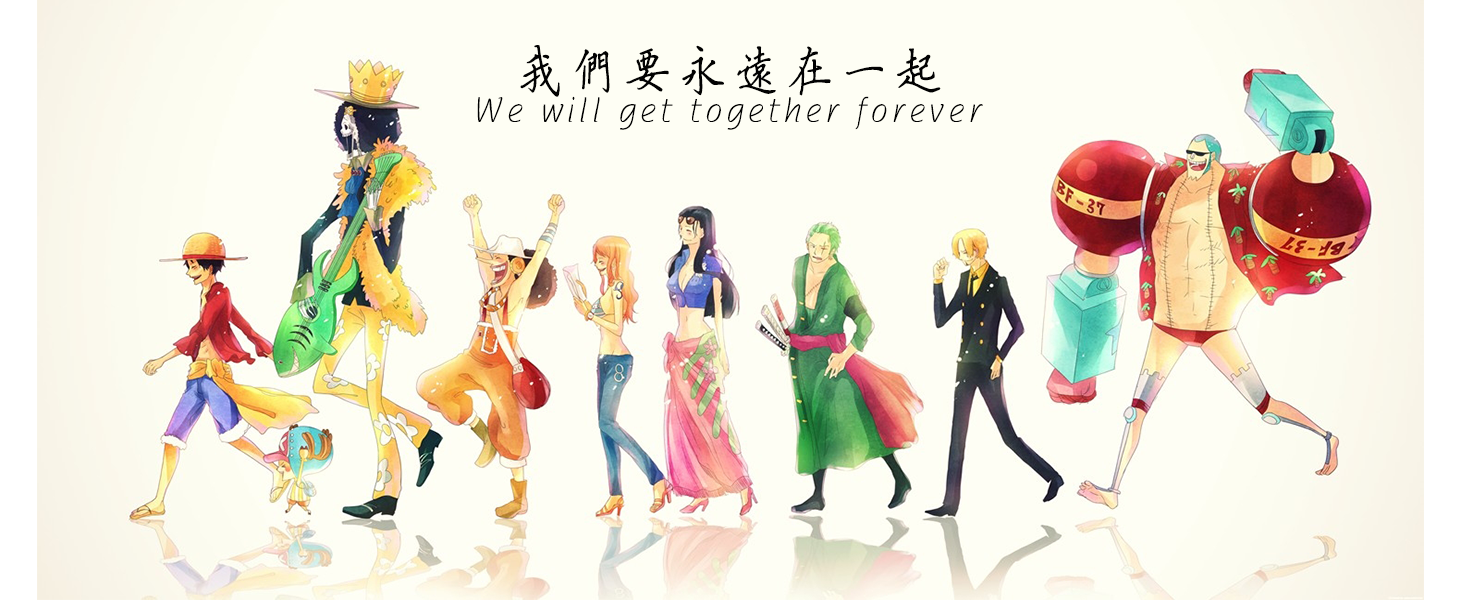
<style>
.page{position:relative;width:1460px;height:600px;background:#fefef4}
.page>*{position:absolute;margin:0}
.t1{font:54px "FZYBKSFW--GB1-0";letter-spacing:0.2em;color:#030303;scale:0.83 1}
.t2{font:36px "FZYBKSFW--GB1-0";letter-spacing:0.2em;color:#010000;scale:0.83 1}
</style>
<div class="page">
<p class="t1" style="left:520px;top:45px;width:421px;height:52px">我们要永远在一起</p>
<p class="t2" style="left:477px;top:96px;width:506px;height:34px">We will get together forever</p>
</div>
